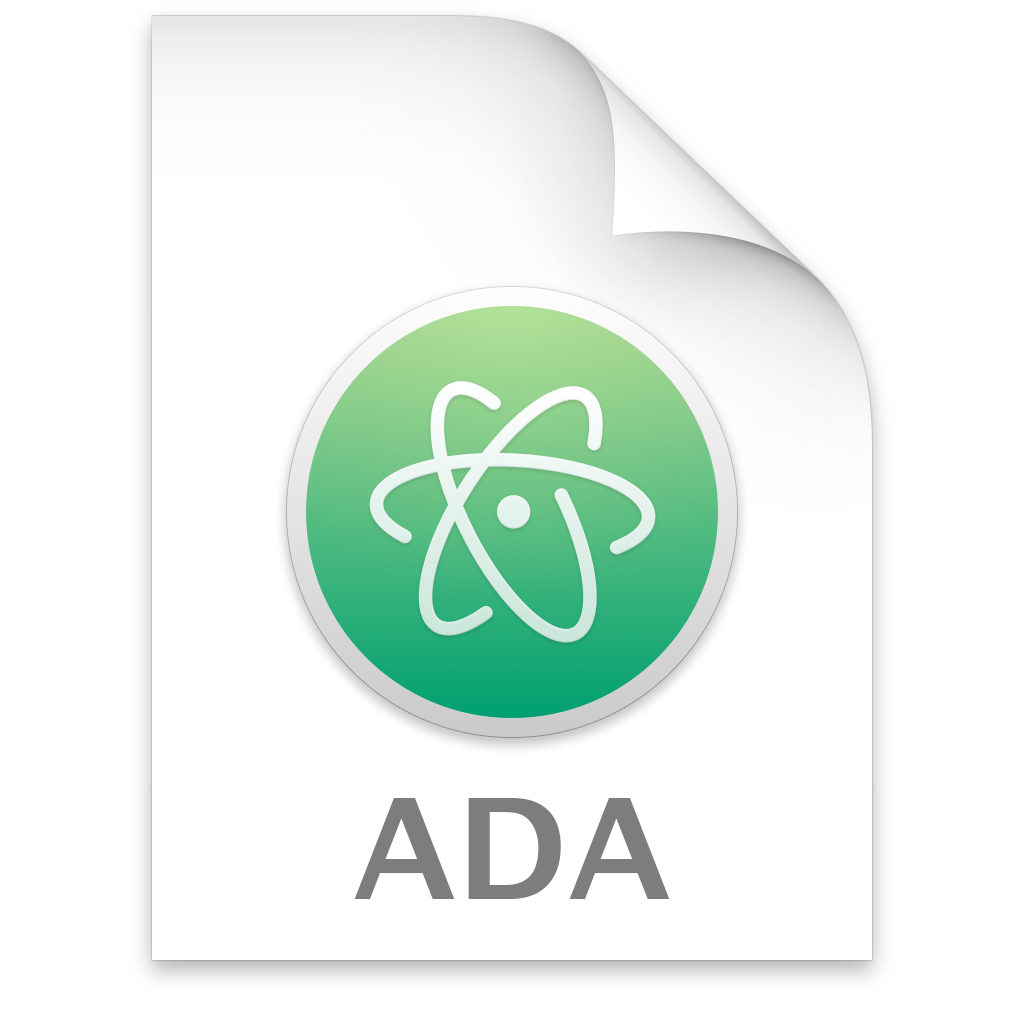
<style>
.page{position:relative;width:1024px;height:1024px;background:#ffffff}
.page>*{position:absolute;margin:0}
.t1{font:140px "LucidaGrande-Bold";color:#7d7d7d}
</style>
<div class="page">
<p class="t1" style="left:354px;top:798px;width:316px;height:101px">ADA</p>
</div>
